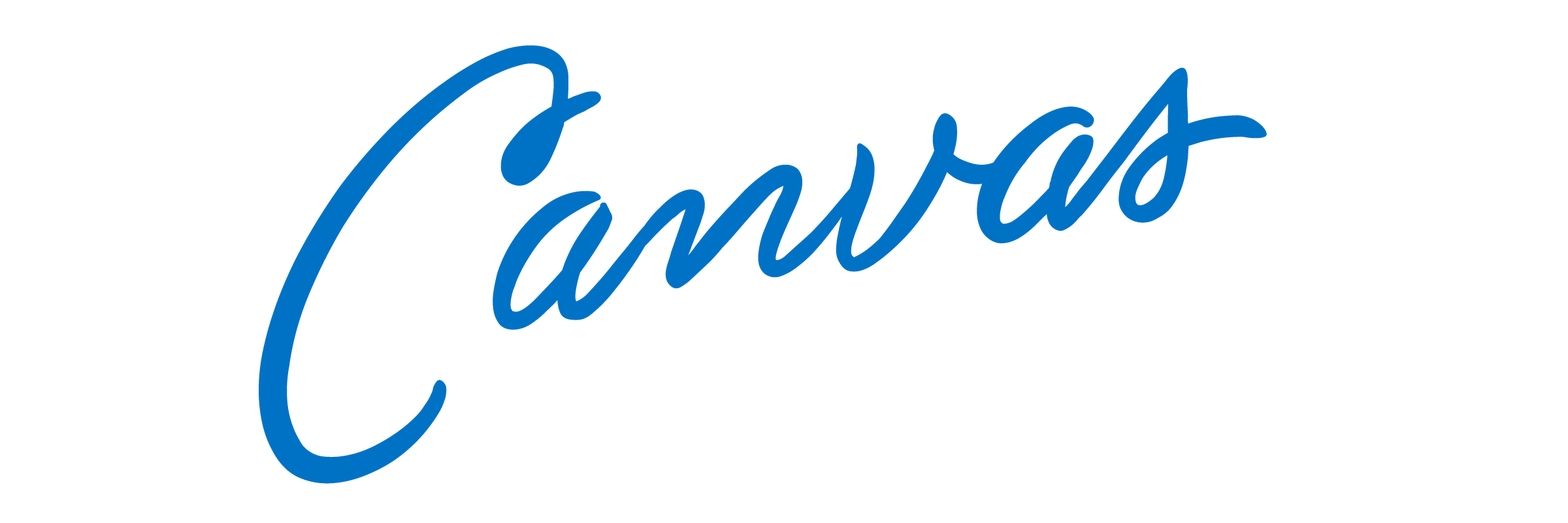
<style>
.page{position:relative;width:1568px;height:523px;background:#ffffff}
.page>*{position:absolute;margin:0}
.t1{font:544.4px "UnthriftFirstPersonal";color:#0072c6}
</style>
<div class="page">
<p class="t1" style="left:259px;top:45px;width:1008px;height:438px;rotate:-10deg">Canvas</p>
</div>
